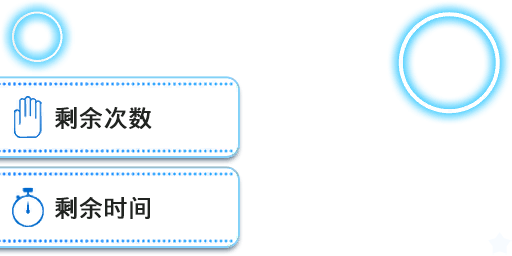
<style>
.page{position:relative;width:512px;height:256px;background:#ffffff}
.page>*{position:absolute;margin:0}
.t1{font:24px "WenQuanYiMicroHeiMono";color:#212421;font-weight:bold}
</style>
<div class="page">
<p class="t1" style="left:55px;top:107px;width:97px;height:22px">剩余次数</p>
<p class="t1" style="left:55px;top:197px;width:95px;height:22px">剩余时间</p>
</div>
